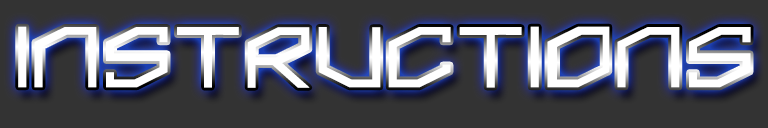
<style>
.page{position:relative;width:768px;height:128px;background:#333333}
.page>*{position:absolute;margin:0}
.t1{font:86px "KinineAlpha";color:#ffffff}
</style>
<div class="page">
<p class="t1" style="left:18px;top:26px;width:733px;height:62px">InstructionS</p>
</div>
